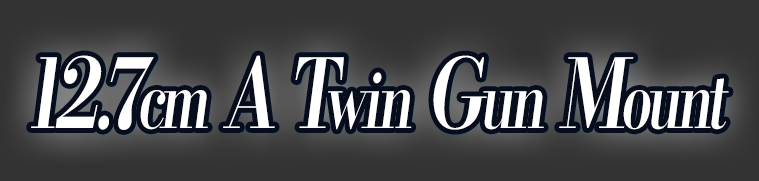
<style>
.page{position:relative;width:759px;height:181px;background:#333333}
.page>*{position:absolute;margin:0}
.t1{font:96px "KochoStd-Heavy";letter-spacing:-0.08em;color:#ffffff;font-style:italic;scale:0.74 1}
.t2{font:76.8px "KochoStd-Heavy";letter-spacing:-0.08em;color:#ffffff;font-style:italic;scale:0.74 1}
</style>
<div class="page">
<p class="t1" style="left:31px;top:55px;width:698px;height:75px">12.7<span class="t2">cm</span> A T<span class="t2">win</span> G<span class="t2">un</span> M<span class="t2">ount</span></p>
</div>
